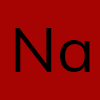
<style>
.page{position:relative;width:100px;height:100px;background:#a60303}
.page>*{position:absolute;margin:0}
.t1{font:62.5px "Muli-Regular";color:#000000}
</style>
<div class="page">
<p class="t1" style="left:15px;top:28px;width:75px;height:44px">Na</p>
</div>
